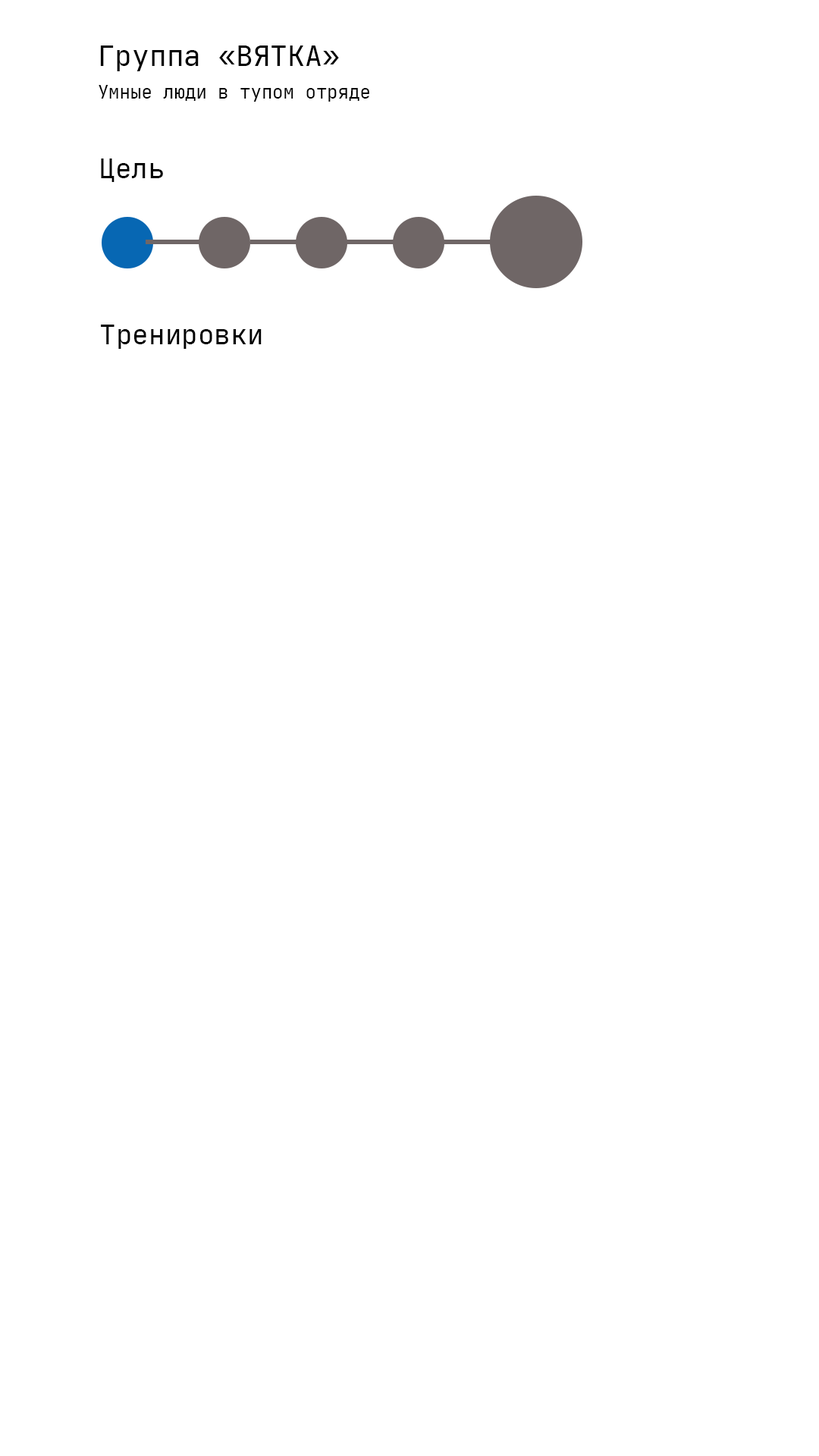
<style>
.page{position:relative;width:819px;height:1456px;background:#ffffff}
.page>*{position:absolute;margin:0}
.t1{font:28.8px "JetBrainsMono-Regular";color:#000000}
.t2{font:18.2px "JetBrainsMono-Regular";color:#000000}
.t3{font:27.3px "JetBrainsMono-Regular";color:#000000}
</style>
<div class="page">
<p class="t1" style="left:100px;top:45px;width:239px;height:26px">Группа «ВЯТКА»</p>
<p class="t2" style="left:99px;top:85px;width:270px;height:17px">Умные люди в тупом отряде</p>
<p class="t3" style="left:101px;top:158px;width:62px;height:24px">Цель</p>
<p class="t3" style="left:101px;top:325px;width:161px;height:24px">Тренировки</p>
</div>
